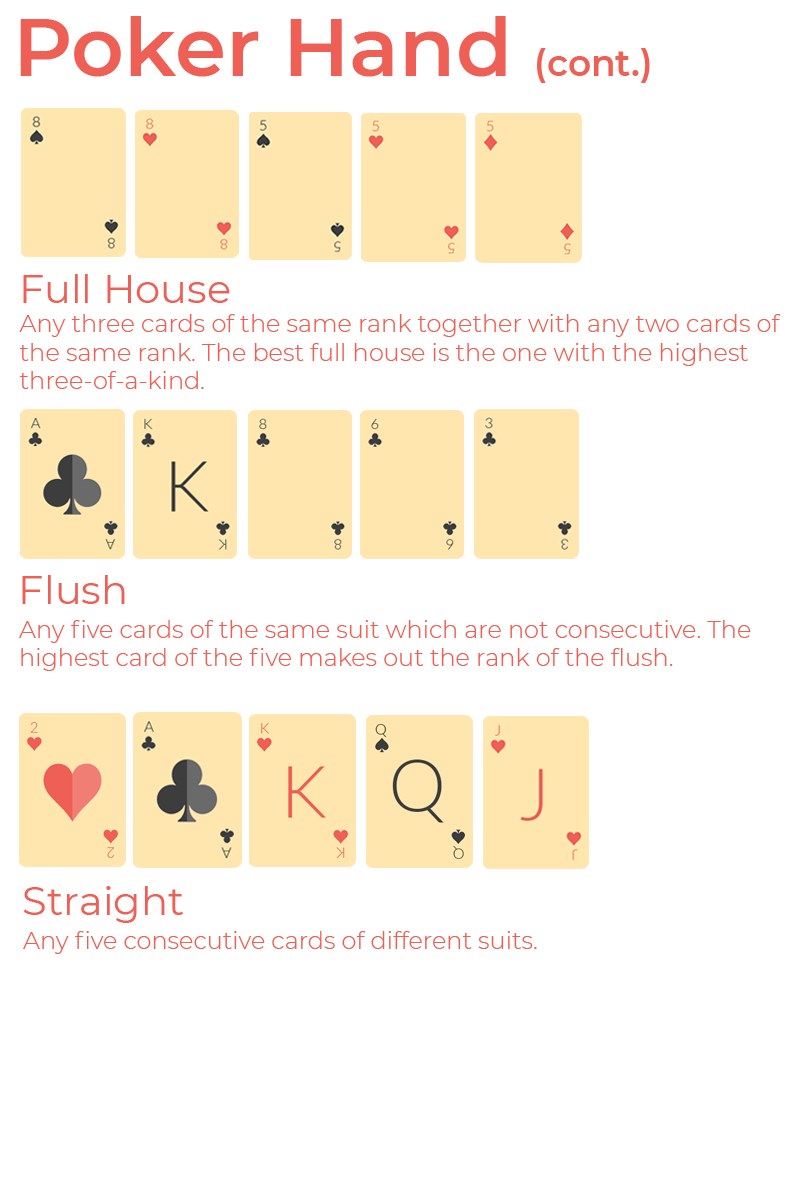
<style>
.page{position:relative;width:800px;height:1200px;background:#ffffff}
.page>*{position:absolute;margin:0}
.t1{font:82px "Montserrat-SemiBold";color:#ee6055}
.t2{font:36px "Montserrat-SemiBold";color:#ee6055}
.t3{font:40px "Montserrat-Regular";color:#ee6055}
.t4{font:24px "Montserrat-Light";color:#ee6055}
</style>
<div class="page">
<p class="t1" style="left:20px;top:16px;width:630px;height:67px">Poker Hand <span class="t2">(cont.)</span></p>
<p class="t3" style="left:23px;top:274px;width:207px;height:29px">Full House</p>
<p class="t4" style="left:19px;top:314px;width:762px;height:75px">Any three cards of the same rank together with any two cards of the same rank. The best full house is the one with the highest three-of-a-kind.</p>
<p class="t3" style="left:22px;top:575px;width:103px;height:29px">Flush</p>
<p class="t4" style="left:19px;top:620px;width:732px;height:51px">Any five cards of the same suit which are not consecutive. The highest card of the five makes out the rank of the flush.</p>
<p class="t3" style="left:23px;top:886px;width:160px;height:37px">Straight</p>
<p class="t4" style="left:23px;top:931px;width:514px;height:23px">Any five consecutive cards of different suits.</p>
</div>
